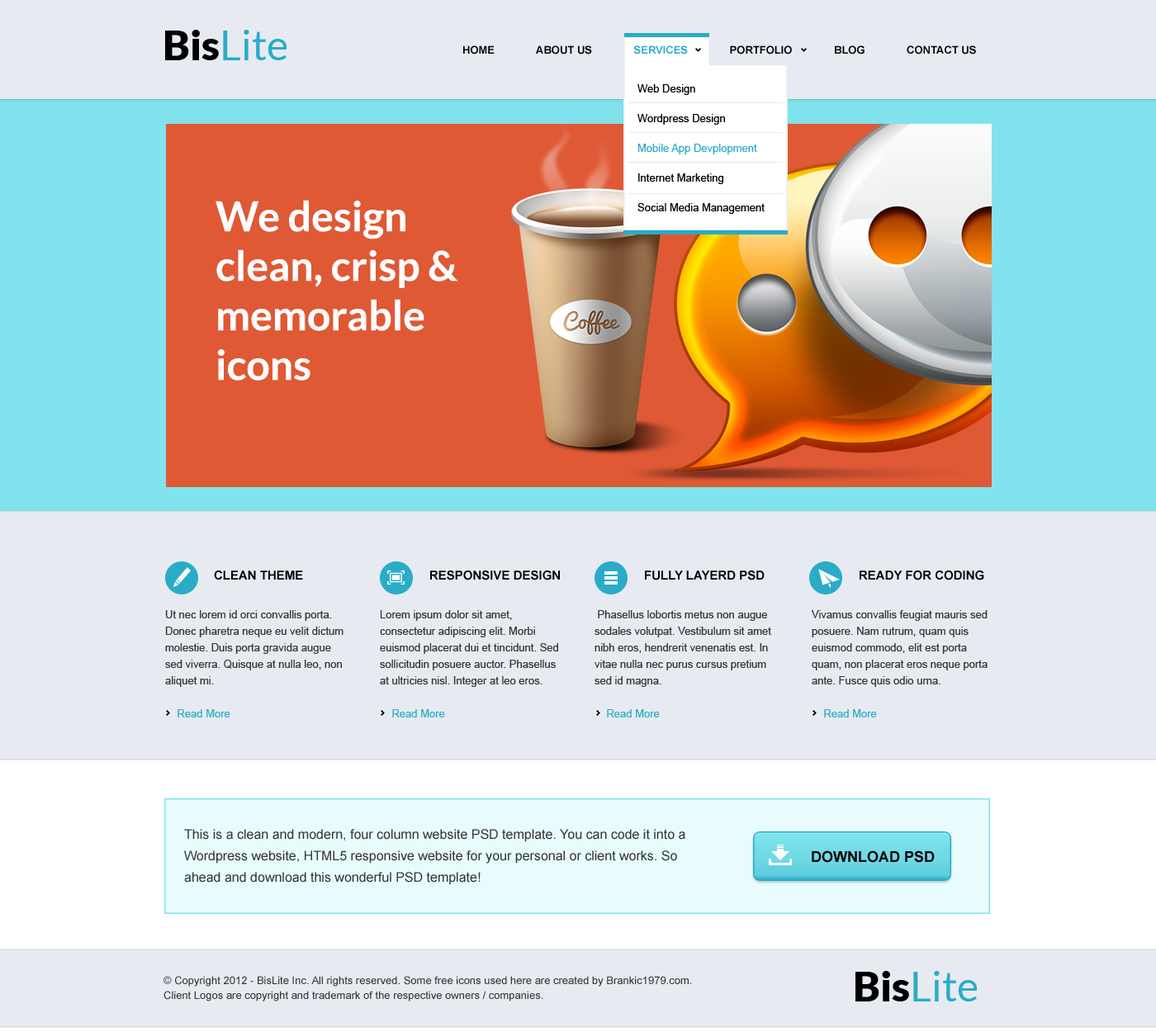
<style>
.page{position:relative;width:1156px;height:1032px;background:#e7ebf1}
.page>*{position:absolute;margin:0}
.t1{font:41.3px "Lato-Regular";color:#2aacc8}
.t2{font:41.3px "Lato-Black";color:#000000}
.t3{font:10.7px "Arial-BoldMT";color:#000000;text-transform:uppercase}
.t4{font:10.7px "Arial-BoldMT";color:#2aacc8;text-transform:uppercase}
.t5{font:10.7px/29.7px "ArialMT";color:#000000}
.t6{font:10.7px/29.7px "ArialMT";color:#2aacc8}
.t7{font:41.3px "Lato-Bold";color:#ffffff}
.t8{font:12.4px "Arial-BoldMT";color:#000000;text-transform:uppercase}
.t9{font:10.7px/16.5px "ArialMT";color:#363636}
.t10{font:10.7px/16.5px "ArialMT";color:#2aacc8}
.t11{font:13.2px/21.5px "ArialMT";color:#363636}
.t12{font:14.9px "Arial-BoldMT";color:#0d0707;text-transform:uppercase}
.t13{font:10.7px/14.9px "ArialMT";color:#363636}
</style>
<div class="page">
<p class="t1" style="left:165px;top:30px;width:122px;height:30px"><span class="t2">Bis</span>Lite</p>
<p class="t3" style="left:463px;top:45px;width:513px;height:9px">Home              About Us              <span class="t4">Services</span>              Portfolio              Blog              Contact Us</p>
<p class="t5" style="left:637px;top:84px;width:127px;height:130px">Web Design<br>Wordpress Design<br><span class="t6">Mobile App Devplopment<br></span>Internet Marketing<br>Social Media Management</p>
<p class="t7" style="left:215px;top:200px;width:243px;height:181px">We design clean, crisp &amp; memorable icons</p>
<p class="t8" style="left:214px;top:570px;width:89px;height:9px">Clean Theme</p>
<p class="t8" style="left:430px;top:570px;width:130px;height:10px">Responsive Design</p>
<p class="t8" style="left:645px;top:570px;width:119px;height:10px">Fully layerd PSD</p>
<p class="t8" style="left:859px;top:570px;width:125px;height:10px">Ready for coding</p>
<p class="t9" style="left:165px;top:610px;width:178px;height:107px">Ut nec lorem id orci convallis porta. Donec pharetra neque eu velit dictum molestie. Duis porta gravida augue sed viverra. Quisque at nulla leo, non aliquet mi. <br><br><span class="t10">    Read More</span></p>
<p class="t9" style="left:380px;top:610px;width:178px;height:107px">Lorem ipsum dolor sit amet, consectetur adipiscing elit. Morbi euismod placerat dui et tincidunt. Sed sollicitudin posuere auctor. Phasellus at ultricies nisl. Integer at leo eros.<br><br><span class="t10">    Read More</span></p>
<p class="t9" style="left:594px;top:610px;width:177px;height:107px">Phasellus lobortis metus non augue sodales volutpat. Vestibulum sit amet nibh eros, hendrerit venenatis est. In vitae nulla nec purus cursus pretium sed id magna. <br><br><span class="t10">    Read More</span></p>
<p class="t9" style="left:811px;top:610px;width:176px;height:107px">Vivamus convallis feugiat mauris sed posuere. Nam rutrum, quam quis euismod commodo, elit est porta quam, non placerat eros neque porta ante. Fusce quis odio urna. <br><br><span class="t10">    Read More</span></p>
<p class="t11" style="left:184px;top:829px;width:501px;height:56px">This is a clean and modern, four column website PSD template. You can code it into a Wordpress website, HTML5 responsive website for your personal or client works. So ahead and download this wonderful PSD template!</p>
<p class="t12" style="left:811px;top:850px;width:123px;height:13px">Download PSD</p>
<p class="t13" style="left:163px;top:976px;width:529px;height:25px">© Copyright 2012 - BisLite Inc. All rights reserved. Some free icons used here are created by Brankic1979.com. <br>Client Logos are copyright and trademark of the respective owners / companies.</p>
<p class="t1" style="left:855px;top:971px;width:122px;height:30px"><span class="t2">Bis</span>Lite</p>
</div>
